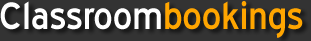
<style>
.page{position:relative;width:311px;height:41px;background:#333333}
.page>*{position:absolute;margin:0}
.t1{font:48px "BlueHighway";color:#ffffff}
.t2{font:48px "BlueHighway";color:#ffa500}
</style>
<div class="page">
<p class="t1" style="left:0px;top:1px;width:161px;height:29px">Classroom</p>
<p class="t2" style="left:165px;top:1px;width:138px;height:37px">bookings</p>
</div>
